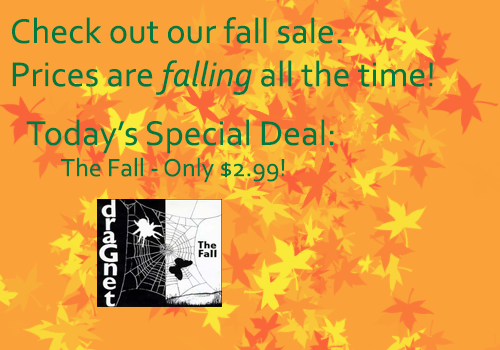
<style>
.page{position:relative;width:500px;height:350px;background:#faa239}
.page>*{position:absolute;margin:0}
.t1{font:36px "Corbel";color:#007a40}
.t2{font:36px "Corbel-Italic";color:#007a40}
.t3{font:26px "Corbel";color:#007a40}
</style>
<div class="page">
<p class="t1" style="left:12px;top:17px;width:421px;height:78px">Check out our fall sale.<br>Prices are <span class="t2">falling</span> all the time!</p>
<p class="t3" style="left:26px;top:119px;width:308px;height:64px"><span class="t1">Today’s Special Deal:<br></span>       The Fall - Only $2.99!</p>
</div>
